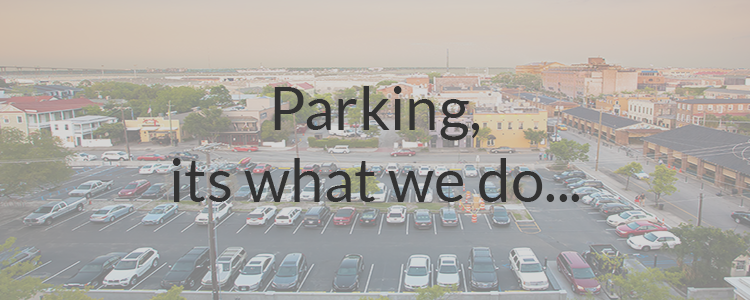
<style>
.page{position:relative;width:750px;height:300px}
.page>*{position:absolute;margin:0}
.t1{font:60px "Lato-Regular";color:#333333}
</style>
<div class="page">
<p class="t1" style="left:172px;top:86px;width:408px;height:116px;text-align:center">Parking,  <br>its what we do...</p>
</div>
